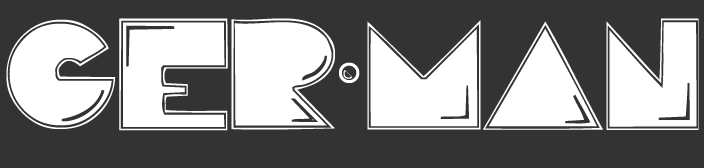
<style>
.page{position:relative;width:704px;height:168px;background:#333333}
.page>*{position:absolute;margin:0}
.t1{font:112px "PacFont";color:#ffffff}
</style>
<div class="page">
<p class="t1" style="left:6px;top:18px;width:693px;height:113px">ger-man</p>
</div>
